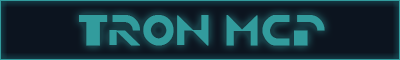
<style>
.page{position:relative;width:400px;height:60px;background:#0c141f}
.page>*{position:absolute;margin:0}
.t1{font:30px "TRON";color:#329c9d;font-weight:bold}
</style>
<div class="page">
<p class="t1" style="left:79px;top:15px;width:246px;height:31px">Tron MCP</p>
</div>
